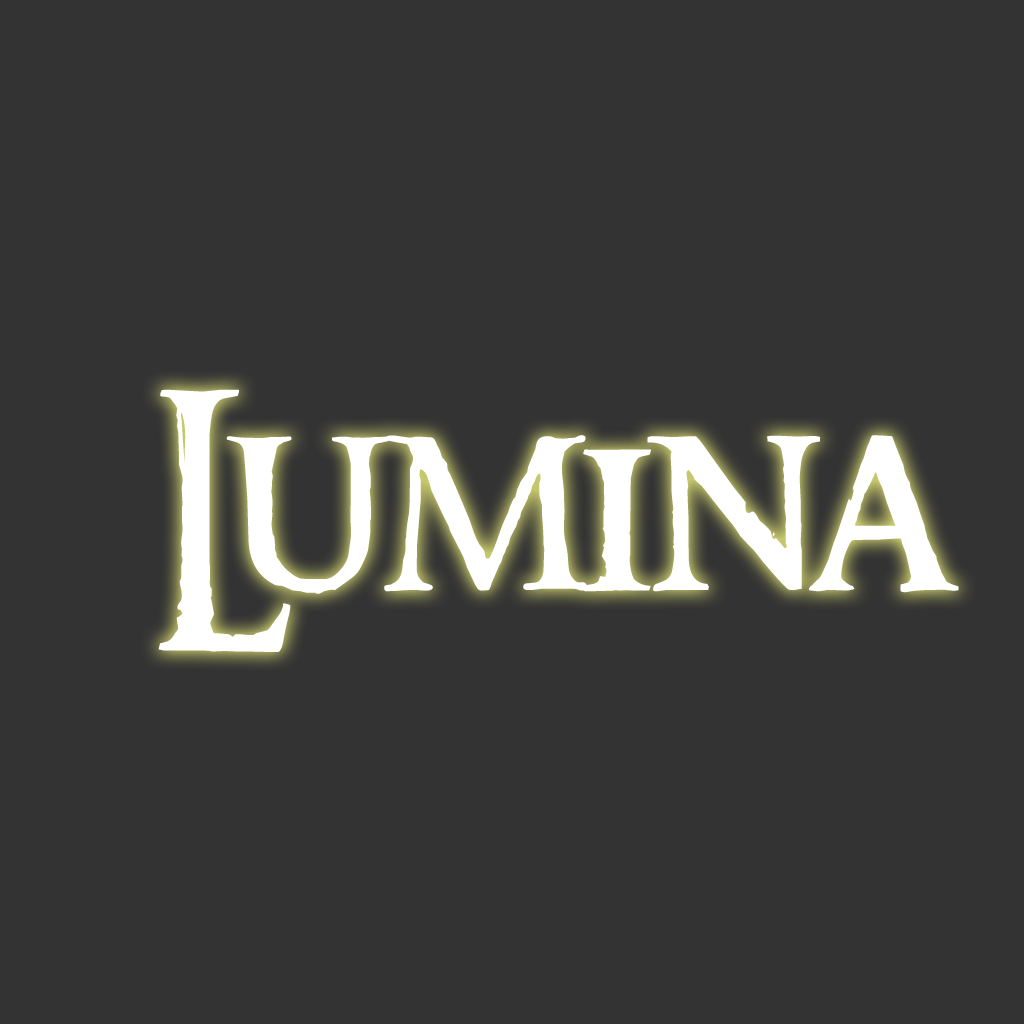
<style>
.page{position:relative;width:1024px;height:1024px;background:#333333}
.page>*{position:absolute;margin:0}
.t1{font:250px "RingbearerMedium";color:#ffffff}
</style>
<div class="page">
<p class="t1" style="left:158px;top:389px;width:801px;height:263px">Lumina</p>
</div>
